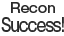
<style>
.page{position:relative;width:64px;height:36px;background:#ffffff}
.page>*{position:absolute;margin:0}
.t1{font:18px/14px "GothicMB101Pro-Medium";letter-spacing:-0.08em;color:#2a2a2a;scale:0.8 1}
.t2{font:13px/14px "GothicMB101Pro-Medium";color:#2a2a2a}
</style>
<div class="page">
<p class="t1" style="left:1px;top:2px;width:63px;height:30px;text-align:center"><span class="t2">Recon<br></span>Success!</p>
</div>
